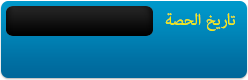
<style>
.page{position:relative;width:248px;height:80px}
.page>*{position:absolute;margin:0}
.t1{font:22px "AdobeArabic-Regular";color:#f9eb06}
</style>
<div class="page">
<p class="t1" style="left:165px;top:13px;width:70px;height:18px">تاريخ الحصة</p>
</div>
